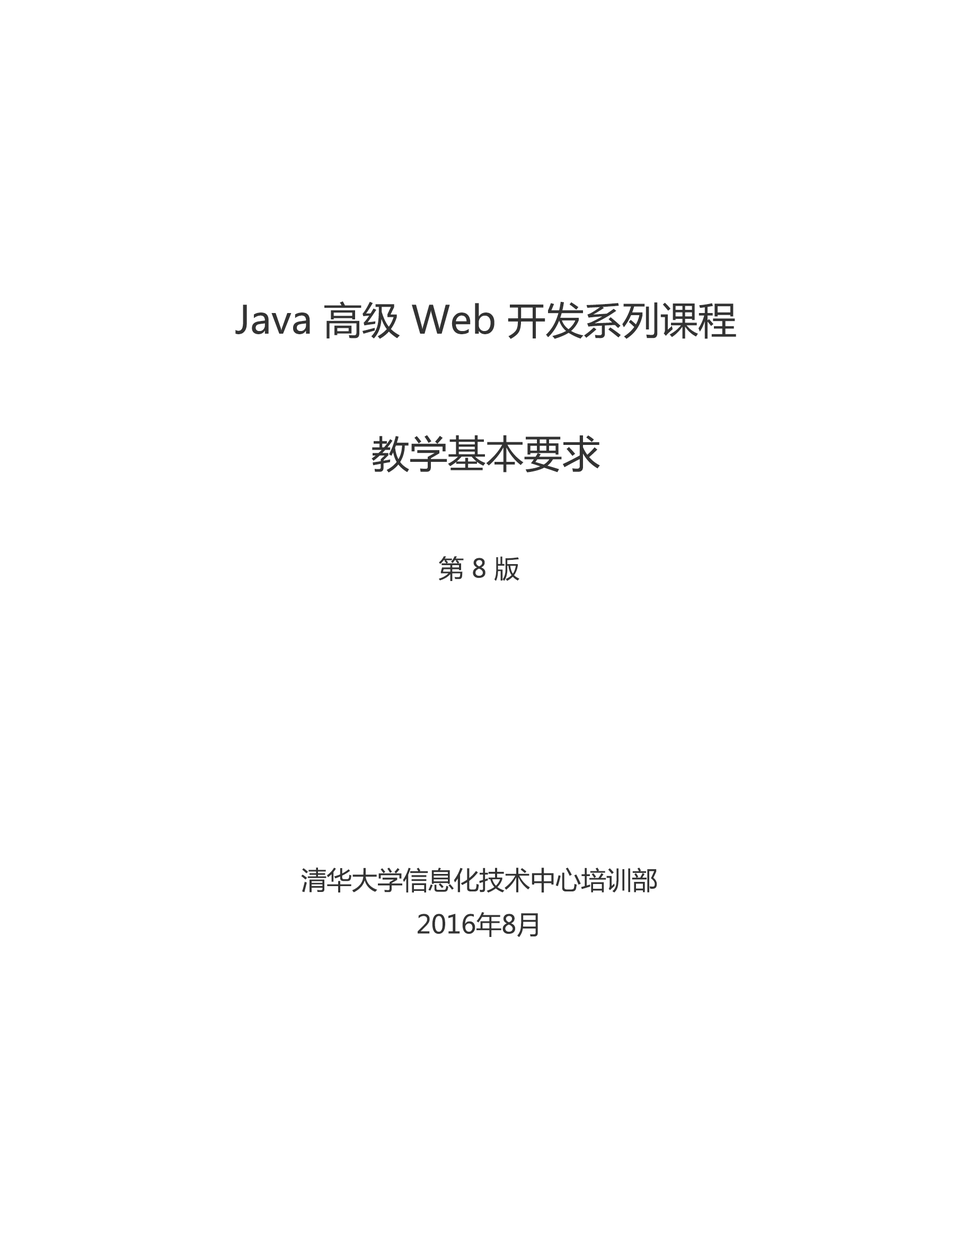
<style>
.page{position:relative;width:954px;height:1250px;background:#ffffff}
.page>*{position:absolute;margin:0}
.t1{font:38.1px "MicrosoftYaHei";color:#333333}
.t2{font:25.4px "MicrosoftYaHei";color:#333333}
</style>
<div class="page">
<p class="t1" style="left:235px;top:301px;width:501px;height:172px;text-align:center">Java 高级 Web 开发系列课程<br><br>教学基本要求</p>
<p class="t2" style="left:301px;top:556px;width:356px;height:382px;text-align:center">第 8 版<br><br><br><br><br><br><br>清华大学信息化技术中心培训部<br>2016年8月</p>
</div>
